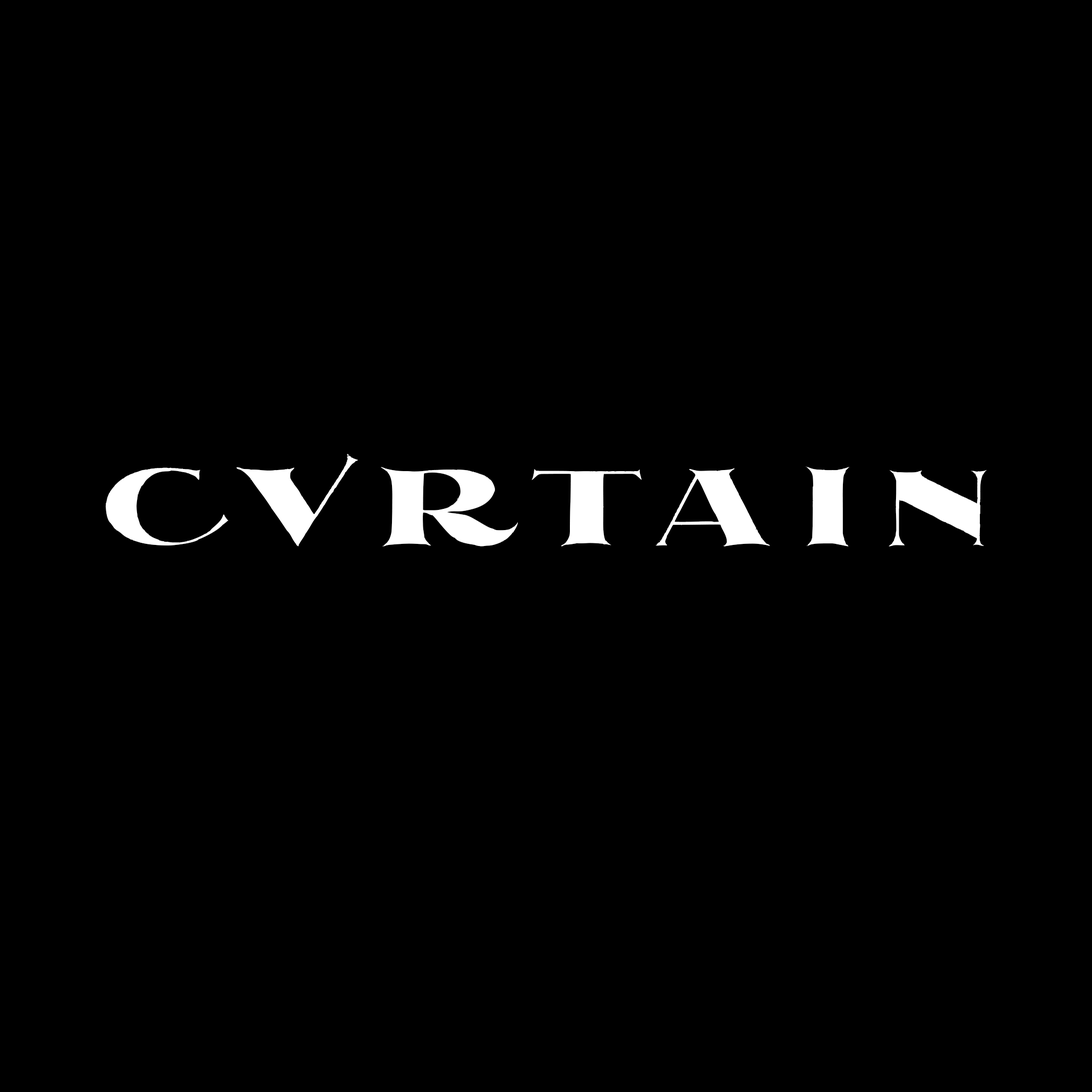
<style>
.page{position:relative;width:1092px;height:1092px;background:#000000}
.page>*{position:absolute;margin:0}
.t1{font:106.2px "BanterWF";letter-spacing:0.185em;color:#ffffff}
</style>
<div class="page">
<p class="t1" style="left:106px;top:454px;width:881px;height:93px">CVRTAIN</p>
</div>
